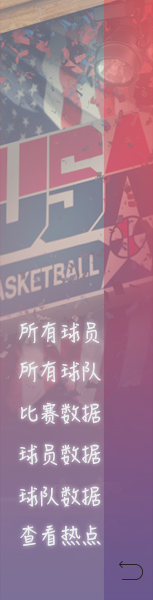
<style>
.page{position:relative;width:153px;height:600px}
.page>*{position:absolute;margin:0}
.t1{font:20.2px "HanziPenSC-W5";color:#ebeff0}
</style>
<div class="page">
<p class="t1" style="left:19px;top:322px;width:81px;height:22px">所有球员</p>
<p class="t1" style="left:19px;top:361px;width:82px;height:22px">所有球队</p>
<p class="t1" style="left:20px;top:402px;width:81px;height:23px">比赛数据</p>
<p class="t1" style="left:19px;top:444px;width:82px;height:22px">球员数据</p>
<p class="t1" style="left:19px;top:486px;width:82px;height:21px">球队数据</p>
<p class="t1" style="left:20px;top:525px;width:81px;height:21px">查看热点</p>
</div>
